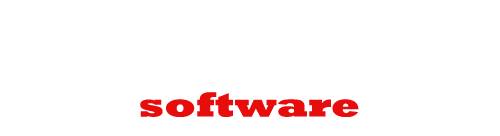
<style>
.page{position:relative;width:500px;height:136px;background:#ffffff}
.page>*{position:absolute;margin:0}
.t1{font:35px "Rockwell-ExtraBold";color:#e60000;scale:1.2 1}
</style>
<div class="page">
<p class="t1" style="left:140px;top:92px;width:219px;height:25px;opacity:0.95">software</p>
</div>
